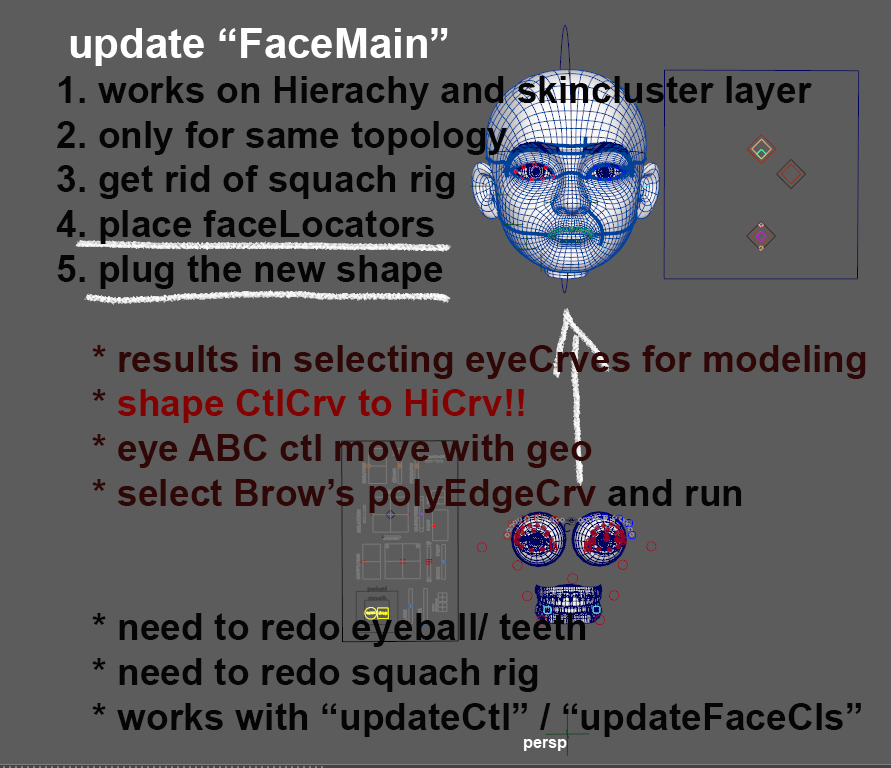
<style>
.page{position:relative;width:891px;height:768px;background:#5c5c5c}
.page>*{position:absolute;margin:0}
.t1{font:37.3px "Arial-BoldMT";color:#050505}
.t2{font:42px "Arial-BoldMT";color:#ffffff}
.t3{font:37.3px "Arial-BoldMT";color:#2f0707}
.t4{font:37.3px "Arial-BoldMT";color:#840101}
</style>
<div class="page">
<p class="t1" style="left:56px;top:28px;width:810px;height:709px"><span class="t2"> update “FaceMain”<br></span>1. works on Hierachy and skincluster layer<br>2. only for same topology<br>3. get rid of squach rig<br>4. place faceLocators<br>5. plug the new shape<br><br><span class="t3"> * results in selecting eyeCrves for modeling<br> * </span><span class="t4">shape CtlCrv to HiCrv!!<br></span><span class="t3"> * eye ABC ctl move with geo<br> * select Brow’s polyEdgeCrv</span> and run<br><br><br> * need to redo eyeball/ teeth<br> * need to redo squach rig<br> * works with “updateCtl” / “updateFaceCls”</p>
</div>
